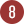
<style>
.page{position:relative;width:24px;height:24px;background:#9b3533}
.page>*{position:absolute;margin:0}
.t1{font:17.6px "DINCondensedVF-Light";letter-spacing:-0.025em;color:#ffffff;text-transform:uppercase;scale:1.14 1}
</style>
<div class="page">
<p class="t1" style="left:9px;top:5px;width:7px;height:14px">8</p>
</div>
